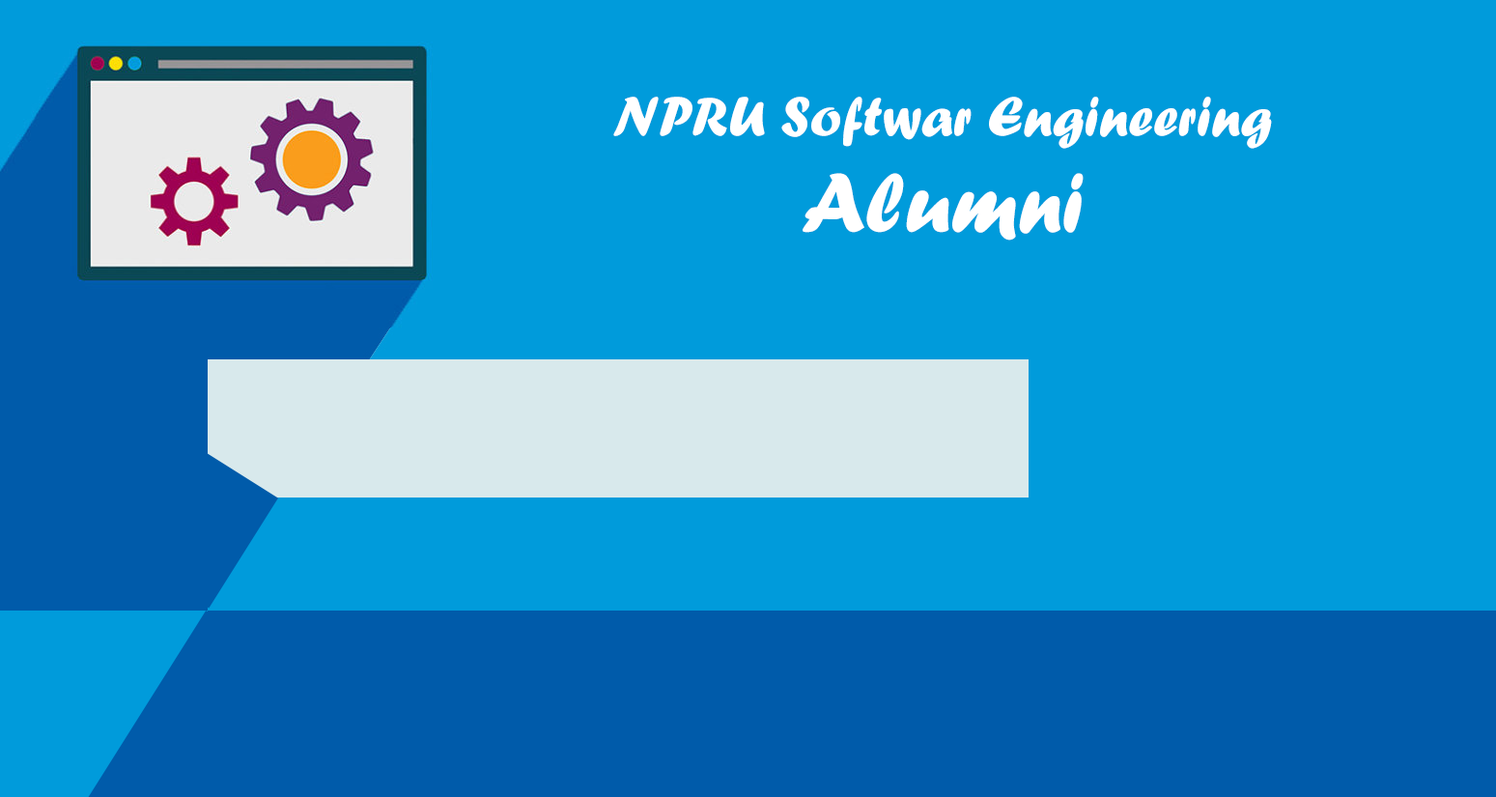
<style>
.page{position:relative;width:1496px;height:797px;background:#009bdb}
.page>*{position:absolute;margin:0}
.t1{font:58px "ForteMT";color:#ffffff}
.t2{font:86.9px "ForteMT";color:#ffffff}
</style>
<div class="page">
<p class="t1" style="left:613px;top:97px;width:659px;height:52px">NPRU Softwar Engineering</p>
<p class="t2" style="left:803px;top:173px;width:281px;height:68px">Alumni</p>
</div>
